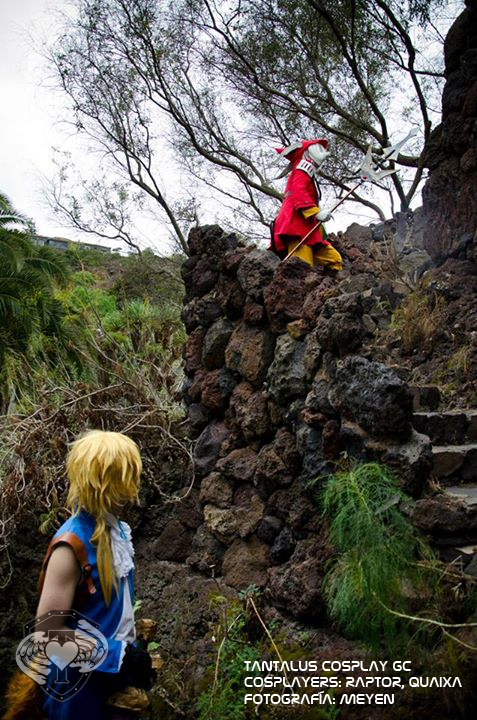
<style>
.page{position:relative;width:477px;height:720px}
.page>*{position:absolute;margin:0}
.t1{font:14px "NasalizationRg-Regular";color:#ffffff}
</style>
<div class="page">
<p class="t1" style="left:244px;top:661px;width:218px;height:43px">TANTALUS COSPLAY GC<br>COSPLAYERS: RAPTOR, QUAIXA<br>FOTOGRAFÍA: MEYEN</p>
</div>
